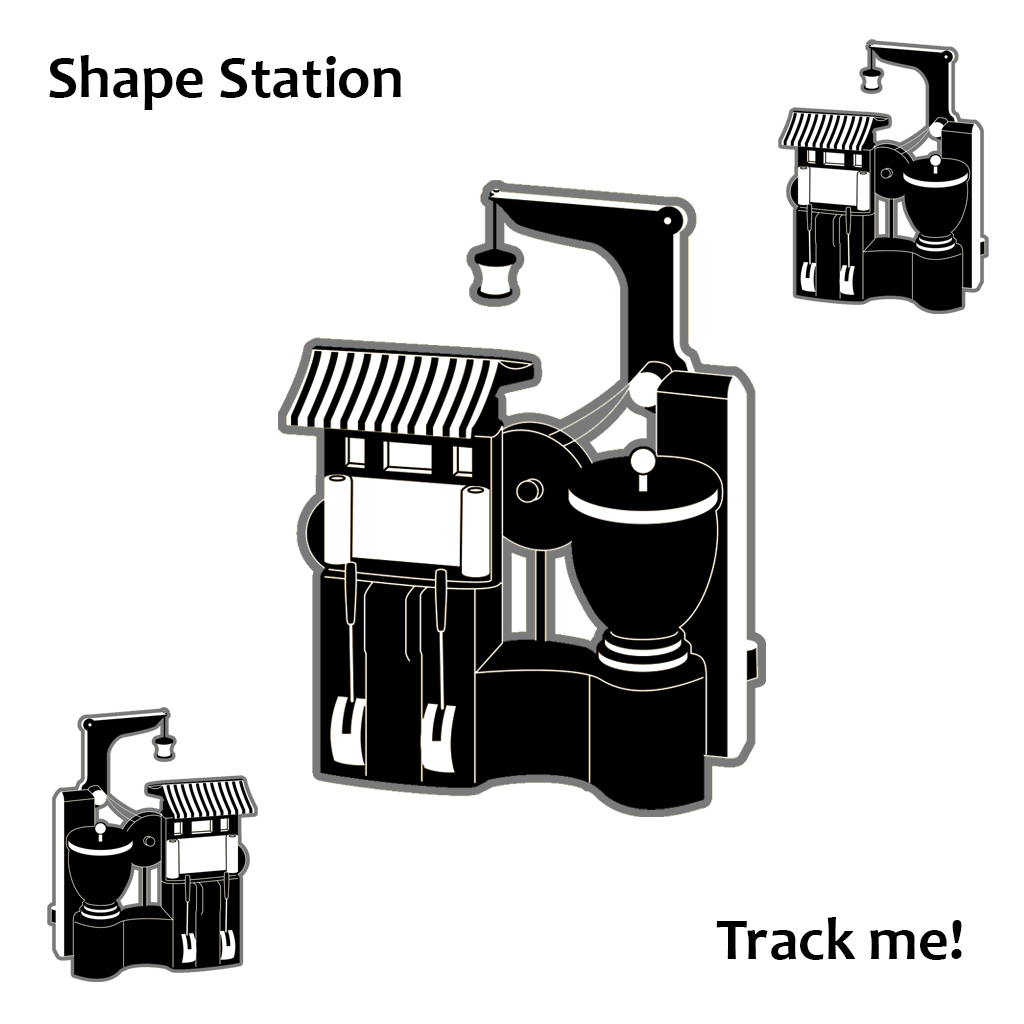
<style>
.page{position:relative;width:1024px;height:1024px;background:#ffffff}
.page>*{position:absolute;margin:0}
.t1{font:60px "Candara-Bold";color:#000000}
</style>
<div class="page">
<p class="t1" style="left:49px;top:55px;width:352px;height:55px">Shape Station</p>
<p class="t1" style="left:716px;top:917px;width:246px;height:43px">Track me!</p>
</div>
